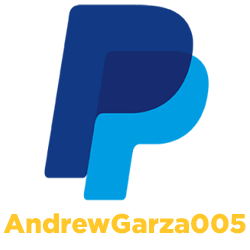
<style>
.page{position:relative;width:250px;height:250px;background:#ffffff}
.page>*{position:absolute;margin:0}
.t1{font:27px "Gotham-Black";color:#ffc729}
</style>
<div class="page">
<p class="t1" style="left:3px;top:213px;width:243px;height:21px">AndrewGarza005</p>
</div>
